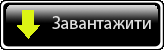
<style>
.page{position:relative;width:164px;height:50px;background:#000000}
.page>*{position:absolute;margin:0}
.t1{font:18px "MyriadPro-Regular";color:#dedede}
</style>
<div class="page">
<p class="t1" style="left:52px;top:16px;width:99px;height:13px">Завантажити</p>
</div>
